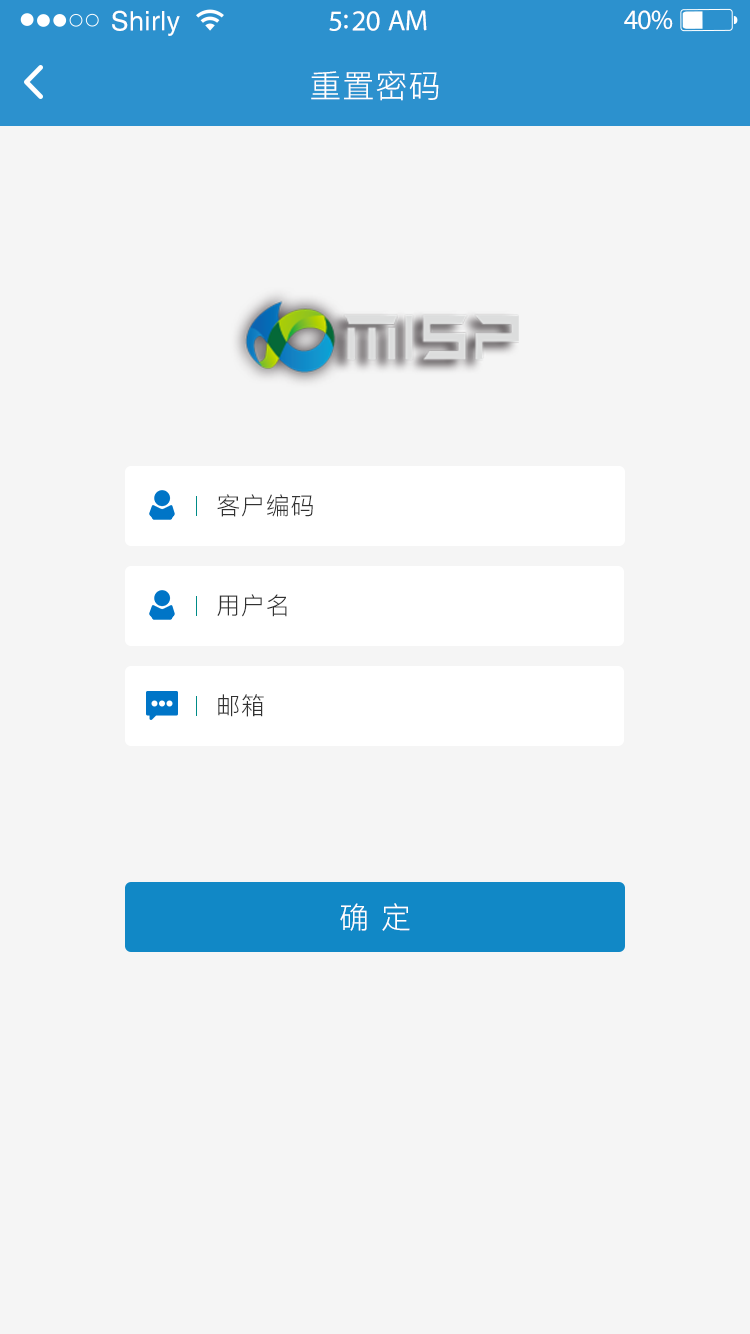
<style>
.page{position:relative;width:750px;height:1334px;background:#f5f5f5}
.page>*{position:absolute;margin:0}
.t1{font:26.8px "Helvetica";letter-spacing:0.02em;color:#ffffff}
.t2{font:29.1px "MyriadPro-Regular";letter-spacing:-0.02em;color:#ffffff}
.t3{font:27.9px "MyriadPro-Regular";letter-spacing:-0.02em;color:#ffffff}
.t4{font:32px "PingFang-SC-Regular";letter-spacing:0.03em;color:#ffffff}
.t5{font:24px "PingFang-SC-Regular";letter-spacing:0.03em;color:#323232}
.t6{font:30px "PingFang-SC-Regular";letter-spacing:0.03em;color:#ffffff}
</style>
<div class="page">
<p class="t1" style="left:112px;top:10px;width:68px;height:26px">Shirly</p>
<p class="t2" style="left:329px;top:10px;width:98px;height:21px">5:20 AM</p>
<p class="t3" style="left:624px;top:10px;width:49px;height:20px">40%</p>
<p class="t4" style="left:311px;top:70px;width:128px;height:31px">重置密码</p>
<p class="t5" style="left:217px;top:494px;width:96px;height:23px">客户编码</p>
<p class="t5" style="left:217px;top:594px;width:70px;height:23px">用户名</p>
<p class="t5" style="left:218px;top:694px;width:46px;height:23px">邮箱</p>
<p class="t6" style="left:340px;top:903px;width:70px;height:28px">确 定</p>
</div>
